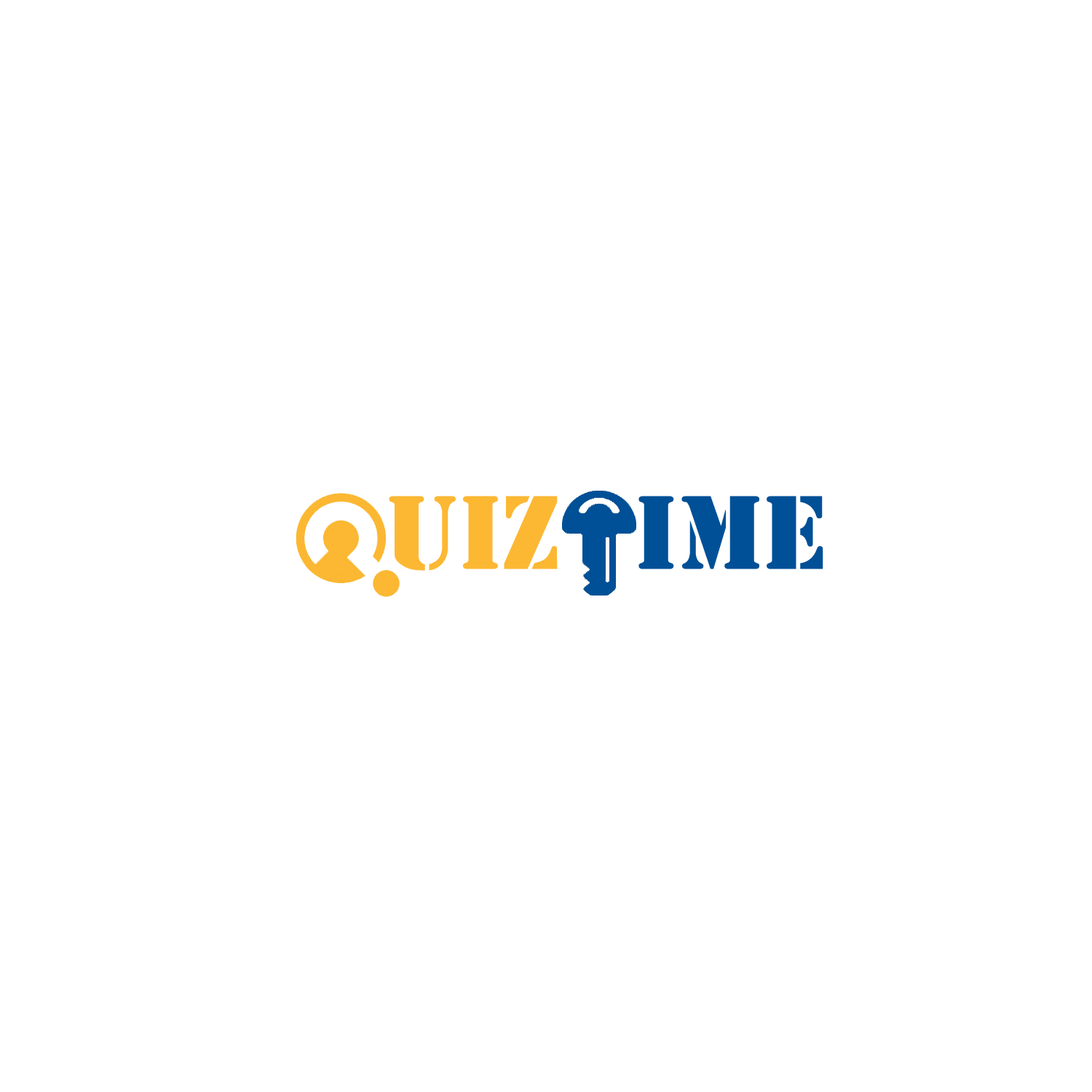
<style>
.page{position:relative;width:1092px;height:1092px;background:#ffffff}
.page>*{position:absolute;margin:0}
.t1{font:97.1px "StencilStd";color:#fcb833}
.t2{font:97.1px "StencilStd";color:#005097}
</style>
<div class="page">
<p class="t1" style="left:389px;top:496px;width:169px;height:75px">UIZ</p>
<p class="t2" style="left:638px;top:496px;width:185px;height:73px">ime</p>
</div>
